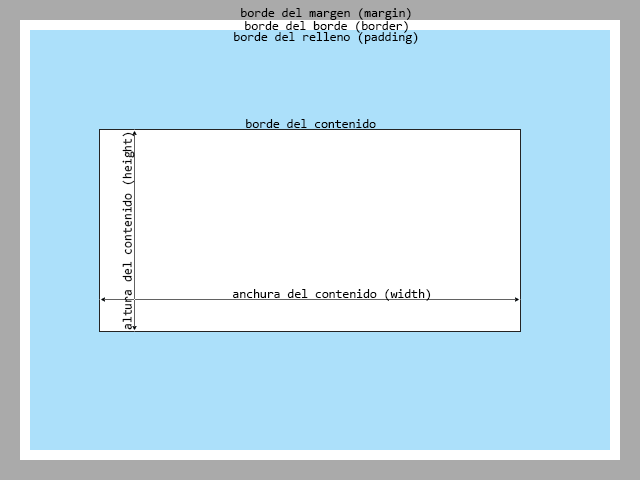
<style>
.page{position:relative;width:640px;height:480px;background:#ace0fa}
.page>*{position:absolute;margin:0}
.t1{font:12.5px "Consolas";color:#000000}
</style>
<div class="page">
<p class="t1" style="left:241px;top:8px;width:170px;height:12px">borde del margen (margin)</p>
<p class="t1" style="left:245px;top:21px;width:163px;height:12px">borde del borde (border)</p>
<p class="t1" style="left:234px;top:32px;width:184px;height:12px">borde del relleno (padding)</p>
<p class="t1" style="left:246px;top:119px;width:130px;height:9px">borde del contenido</p>
<p class="t1" style="left:122px;top:132px;width:13px;height:198px;rotate:-90deg">altura del contenido (height)</p>
<p class="t1" style="left:233px;top:289px;width:198px;height:12px">anchura del contenido (width)</p>
</div>
